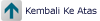
<style>
.page{position:relative;width:100px;height:21px;background:#ffffff}
.page>*{position:absolute;margin:0}
.t1{font:8.8px "Verdana";color:#000333}
</style>
<div class="page">
<p class="t1" style="left:26px;top:7px;width:71px;height:7px">Kembali Ke Atas</p>
</div>
